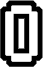
<style>
.page{position:relative;width:43px;height:67px;background:#ffffff}
.page>*{position:absolute;margin:0}
.t1{font:72px "Cubic_11";letter-spacing:0.1em;color:#ffffff;font-weight:bold}
</style>
<div class="page">
<p class="t1" style="left:5px;top:5px;width:33px;height:57px">0</p>
</div>
